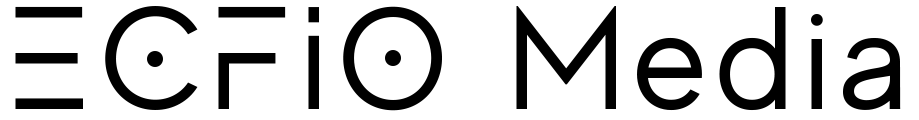
<style>
.page{position:relative;width:919px;height:120px;background:#ffffff}
.page>*{position:absolute;margin:0}
.t1{font:145px "MADEEvolveSansEVO";letter-spacing:0.06em;color:#000000}
</style>
<div class="page">
<p class="t1" style="left:15px;top:6px;width:886px;height:105px">ECFIO Media</p>
</div>
